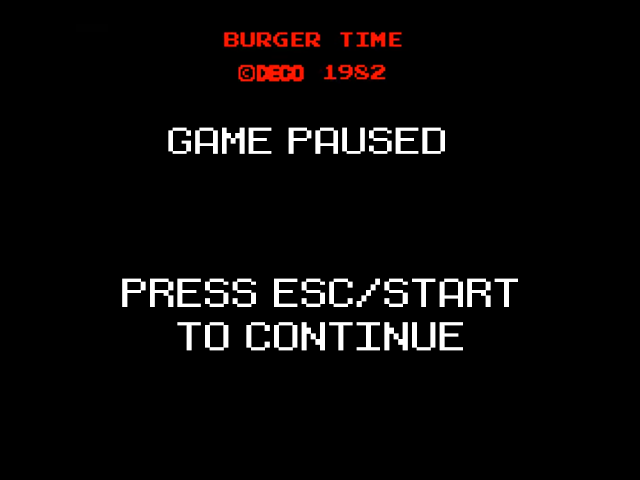
<style>
.page{position:relative;width:640px;height:480px;background:#000000}
.page>*{position:absolute;margin:0}
.t1{font:33.4px "Power-Red-and-Blue-Intl";color:#ffffff;scale:1.74 1}
.t2{font:36.2px "Power-Red-and-Blue-Intl";color:#ffffff;scale:1.66 1}
</style>
<div class="page">
<p class="t1" style="left:168px;top:127px;width:277px;height:27px">GAME PAUSED</p>
<p class="t2" style="left:122px;top:278px;width:396px;height:73px;text-align:center">PRESS ESC/START<br>TO CONTINUE</p>
</div>
